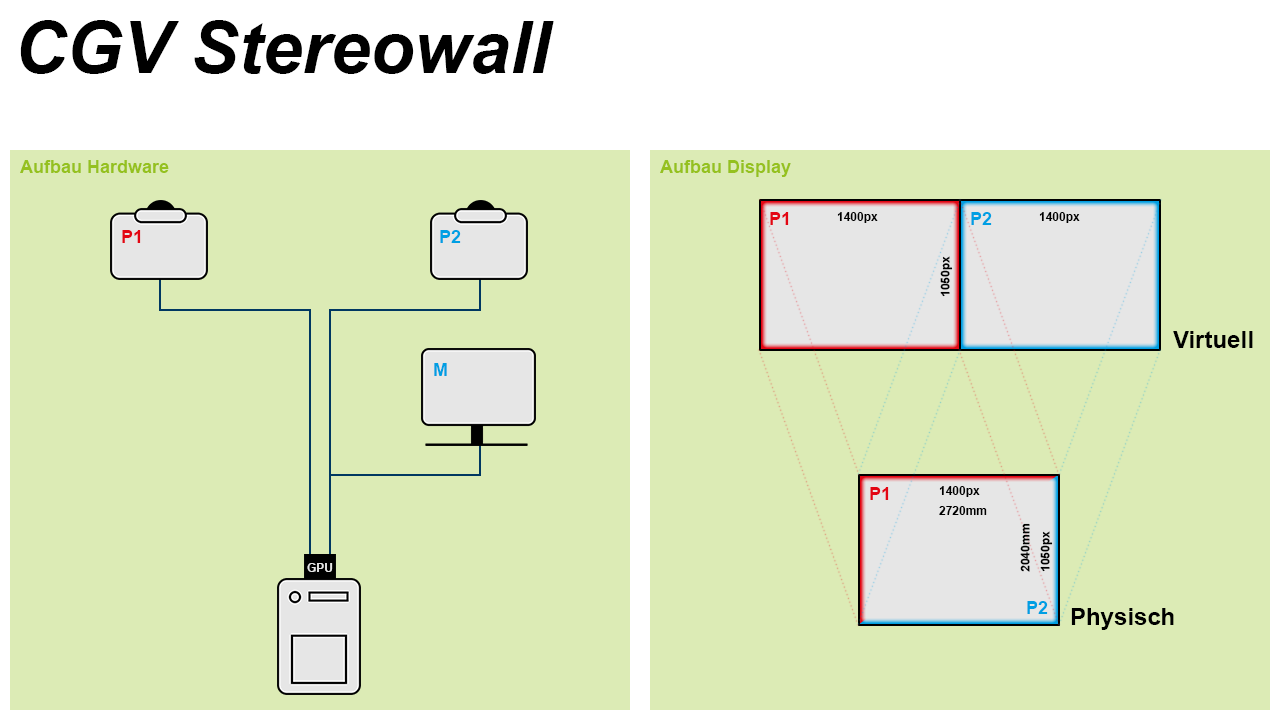
<style>
.page{position:relative;width:1280px;height:720px;background:#dcebb5}
.page>*{position:absolute;margin:0}
.t1{font:72px "Arial-BoldItalicMT";color:#000000}
.t2{font:18px "Arial-BoldMT";color:#95c11f}
.t3{font:18px "Arial-BoldMT";color:#e30613}
.t4{font:12px "Arial-BoldMT";color:#000000}
.t5{font:18px "Arial-BoldMT";color:#009fe3}
.t6{font:12.2px "Arial-BoldMT";color:#000000}
.t7{font:24px "Arial-BoldMT";color:#000000}
</style>
<div class="page">
<p class="t1" style="left:20px;top:20px;width:534px;height:54px">CGV Stereowall</p>
<p class="t2" style="left:20px;top:160px;width:149px;height:13px">Aufbau Hardware</p>
<p class="t2" style="left:660px;top:160px;width:131px;height:17px">Aufbau Display</p>
<p class="t3" style="left:770px;top:212px;width:19px;height:13px">P1</p>
<p class="t4" style="left:837px;top:212px;width:41px;height:11px">1400px</p>
<p class="t5" style="left:971px;top:212px;width:21px;height:13px">P2</p>
<p class="t4" style="left:1039px;top:212px;width:41px;height:11px">1400px</p>
<p class="t3" style="left:122px;top:230px;width:19px;height:13px">P1</p>
<p class="t5" style="left:440px;top:230px;width:21px;height:13px">P2</p>
<p class="t6" style="left:940px;top:256px;width:13px;height:41px;rotate:-90deg">1050px</p>
<p class="t7" style="left:1173px;top:331px;width:80px;height:17px">Virtuell</p>
<p class="t5" style="left:434px;top:363px;width:13px;height:13px">M</p>
<p class="t4" style="left:939px;top:486px;width:41px;height:11px">1400px</p>
<p class="t3" style="left:870px;top:487px;width:19px;height:13px">P1</p>
<p class="t4" style="left:939px;top:506px;width:48px;height:9px">2720mm</p>
<p class="t6" style="left:1020px;top:523px;width:10px;height:49px;rotate:-90deg">2040mm</p>
<p class="t6" style="left:1040px;top:531px;width:13px;height:41px;rotate:-90deg">1050px</p>
<p class="t5" style="left:1027px;top:601px;width:21px;height:13px">P2</p>
<p class="t7" style="left:1071px;top:608px;width:103px;height:22px">Physisch</p>
</div>
